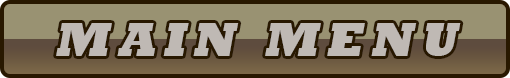
<style>
.page{position:relative;width:510px;height:78px;background:#999272}
.page>*{position:absolute;margin:0}
.t1{font:48.6px "Rockwell-ExtraBold";letter-spacing:0.16em;color:#bfb9b4;font-style:italic}
</style>
<div class="page">
<p class="t1" style="left:56px;top:23px;width:405px;height:33px">MAIN MENU</p>
</div>
